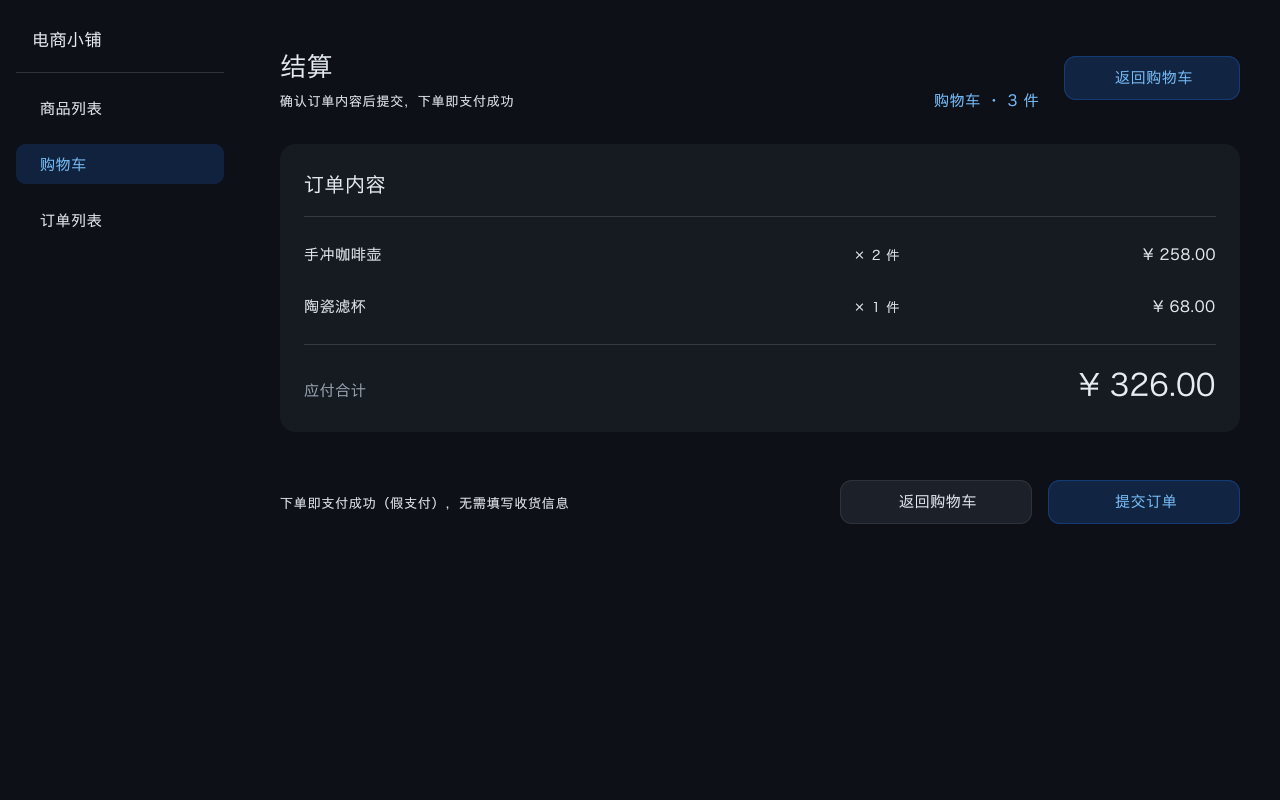
<style>
.page{position:relative;width:1280px;height:800px;background:#0d1117}
.page>*{position:absolute;margin:0}
.t1{font:17px "HiraginoSansGB-Regular";letter-spacing:0.03em;color:#e6edf3}
.t2{font:26px "HiraginoSansGB-Regular";letter-spacing:0.02em;color:#e6edf3}
.t3{font:15px "HiraginoSansGB-Regular";letter-spacing:0.04em;color:#79c0ff}
.t4{font:15px "HiraginoSansGB-Regular";letter-spacing:0.04em;color:#e6edf3}
.t5{font:13px "HiraginoSansGB-Regular";letter-spacing:0.06em;color:#e6edf3}
.t6{font:20px "HiraginoSansGB-Regular";letter-spacing:0.024em;color:#e6edf3}
.t7{font:30px "HiraginoSansGB-Regular";color:#e6edf3}
.t8{font:15px "HiraginoSansGB-Regular";letter-spacing:0.04em;color:#9ba7b4}
</style>
<div class="page">
<p class="t1" style="left:33px;top:31px;width:69px;height:18px">电商小铺</p>
<p class="t2" style="left:280px;top:53px;width:53px;height:27px">结算</p>
<p class="t3" style="left:1114px;top:70px;width:79px;height:16px">返回购物车</p>
<p class="t4" style="left:39px;top:101px;width:64px;height:16px">商品列表</p>
<p class="t5" style="left:279px;top:94px;width:235px;height:15px">确认订单内容后提交，下单即支付成功</p>
<p class="t3" style="left:933px;top:93px;width:107px;height:16px">购物车 · 3 件</p>
<p class="t3" style="left:39px;top:157px;width:48px;height:16px">购物车</p>
<p class="t6" style="left:303px;top:175px;width:83px;height:20px">订单内容</p>
<p class="t4" style="left:39px;top:213px;width:64px;height:16px">订单列表</p>
<p class="t4" style="left:303px;top:247px;width:79px;height:15px">手冲咖啡壶</p>
<p class="t5" style="left:854px;top:249px;width:46px;height:13px">× 2 件</p>
<p class="t4" style="left:1142px;top:248px;width:74px;height:14px">¥ 258.00</p>
<p class="t4" style="left:304px;top:299px;width:63px;height:16px">陶瓷滤杯</p>
<p class="t5" style="left:854px;top:301px;width:46px;height:13px">× 1 件</p>
<p class="t4" style="left:1152px;top:300px;width:64px;height:14px">¥ 68.00</p>
<p class="t7" style="left:1078px;top:372px;width:138px;height:26px">¥ 326.00</p>
<p class="t8" style="left:303px;top:383px;width:64px;height:15px">应付合计</p>
<p class="t5" style="left:279px;top:496px;width:290px;height:15px">下单即支付成功（假支付），无需填写收货信息</p>
<p class="t4" style="left:898px;top:494px;width:79px;height:16px">返回购物车</p>
<p class="t3" style="left:1114px;top:494px;width:63px;height:16px">提交订单</p>
</div>
